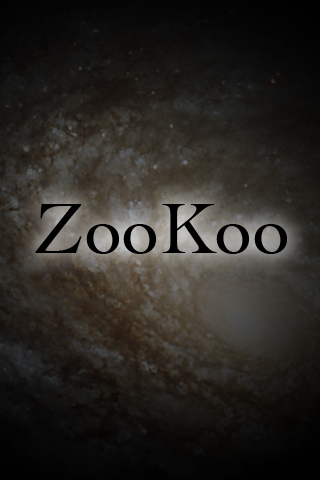
<style>
.page{position:relative;width:320px;height:480px}
.page>*{position:absolute;margin:0}
.t1{font:75px "Cochin";color:#000000}
</style>
<div class="page">
<p class="t1" style="left:35px;top:204px;width:252px;height:50px">ZooKoo</p>
</div>
